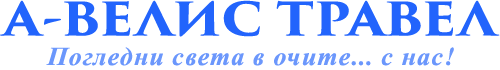
<style>
.page{position:relative;width:500px;height:70px;background:#ffffff}
.page>*{position:absolute;margin:0}
.t1{font:45px "TrajanPro3-Bold";color:#2264fc;scale:1.12 1}
.t2{font:26px "TimesNewRomanPS-BoldItalicMT";letter-spacing:0.05em;color:#6b97fc}
</style>
<div class="page">
<p class="t1" style="left:0px;top:0px;width:500px;height:37px">А-ВЕЛИС ТРАВЕЛ</p>
<p class="t2" style="left:46px;top:47px;width:408px;height:19px">Погледни света в очите... с нас!</p>
</div>
